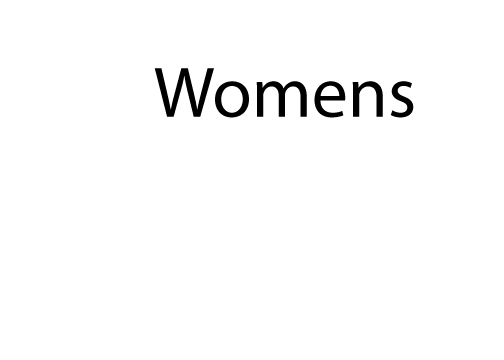
<style>
.page{position:relative;width:504px;height:360px;background:#ffffff}
.page>*{position:absolute;margin:0}
.t1{font:72px "MyriadPro-Regular";color:#000000}
</style>
<div class="page">
<p class="t1" style="left:154px;top:68px;width:260px;height:50px">Womens</p>
</div>
